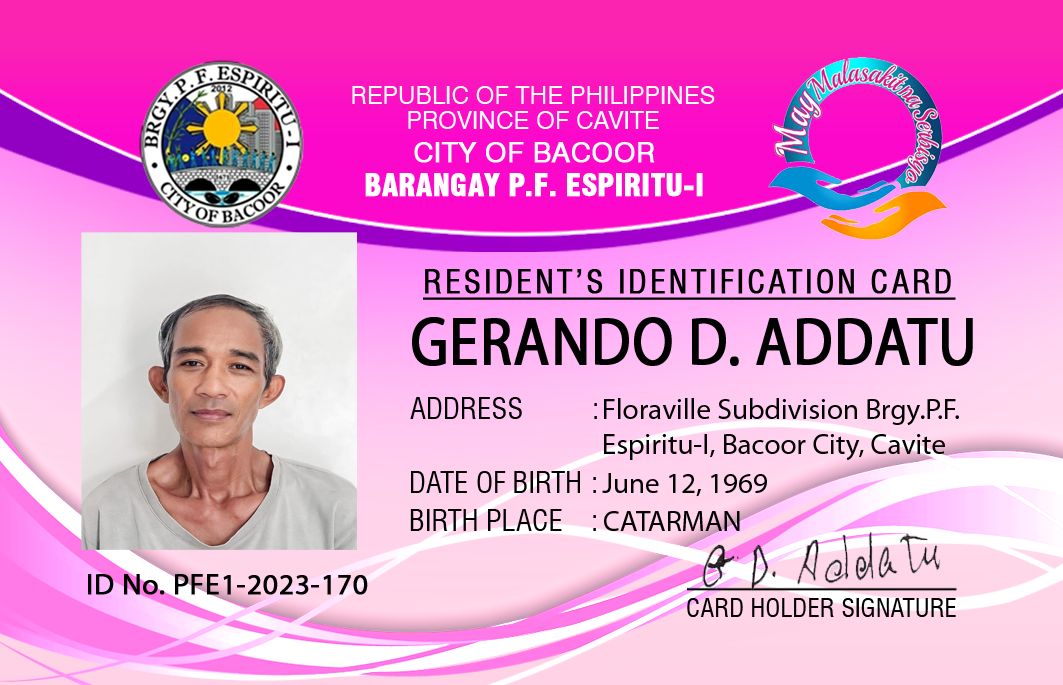
<style>
.page{position:relative;width:1063px;height:685px}
.page>*{position:absolute;margin:0}
.t1{font:24.6px/24.6px "Swiss721BT-Roman";color:#ffffff}
.t2{font:28px "Swiss721BT-Roman";color:#ffffff;font-weight:bold}
.t3{font:29.5px "Swiss721BT-BlackCondensed";color:#ffffff;font-weight:bold}
.t4{font:31.3px "Swiss721BT-RomanCondensed";letter-spacing:0.085em;color:#000000;text-transform:uppercase;font-weight:bold;text-decoration:underline}
.t5{font:67.9px "MyriadPro-Regular";letter-spacing:0.01em;color:#010101;text-transform:uppercase;font-weight:bold;scale:0.85 1}
.t6{font:29.2px "Swiss721BT-RomanCondensed";color:#010101}
.t7{font:29.2px "MyriadPro-Regular";color:#010101}
.t8{font:29.2px "MyriadPro-Regular";letter-spacing:0.01em;color:#010101;font-weight:bold}
.t9{font:25px "Swiss721BT-RomanCondensed";letter-spacing:0.01em;color:#010101;text-transform:uppercase}
</style>
<div class="page">
<p class="t1" style="left:352px;top:86px;width:363px;height:43px;text-align:center">REPUBLIC OF THE PHILIPPINES<br>PROVINCE OF CAVITE</p>
<p class="t2" style="left:414px;top:142px;width:241px;height:21px">CITY OF BACOOR</p>
<p class="t3" style="left:365px;top:173px;width:338px;height:24px">BARANGAY P.F. ESPIRITU-I</p>
<p class="t4" style="left:423px;top:269px;width:533px;height:31px">residenT’S identification card</p>
<p class="t5" style="left:412px;top:317px;width:561px;height:49px">GERANDO D. ADDATU</p>
<p class="t6" style="left:410px;top:397px;width:187px;height:22px">ADDRESS     :</p>
<p class="t7" style="left:604px;top:398px;width:355px;height:63px">Floraville Subdivision Brgy.P.F. <br>Espiritu-I, Bacoor City, Cavite</p>
<p class="t6" style="left:411px;top:471px;width:185px;height:22px">DATE OF BIRTH  :</p>
<p class="t7" style="left:602px;top:473px;width:165px;height:24px">June 12, 1969</p>
<p class="t6" style="left:410px;top:509px;width:186px;height:22px">BIRTH PLACE   :</p>
<p class="t7" style="left:604px;top:511px;width:136px;height:20px">CATARMAN</p>
<p class="t8" style="left:88px;top:574px;width:280px;height:21px">ID No. PFE1-2023-170</p>
<p class="t9" style="left:687px;top:598px;width:269px;height:19px">card holder signature</p>
</div>
